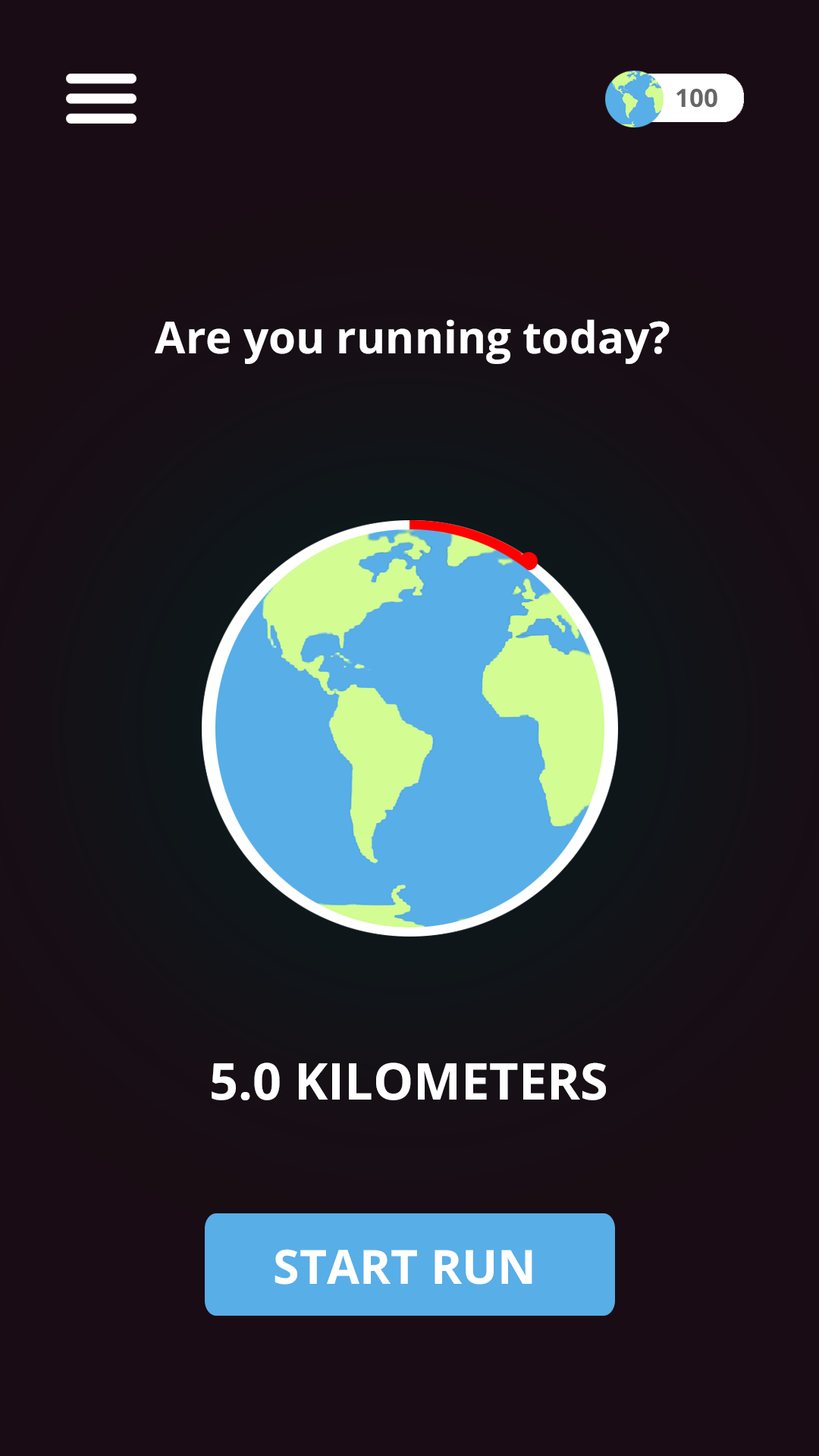
<style>
.page{position:relative;width:819px;height:1456px;background:#1a0c14}
.page>*{position:absolute;margin:0}
.t1{font:25.3px "OpenSans-Bold";color:#666666}
.t2{font:44.2px "OpenSans-Bold";color:#ffffff}
.t3{font:50.6px "OpenSans-Bold";color:#ffffff}
.t4{font:47.4px "OpenSans-Bold";color:#ffffff}
</style>
<div class="page">
<p class="t1" style="left:676px;top:89px;width:41px;height:19px">100</p>
<p class="t2" style="left:155px;top:319px;width:515px;height:45px">Are you running today?</p>
<p class="t3" style="left:212px;top:1062px;width:394px;height:38px">5.0 KILOMETERS</p>
<p class="t4" style="left:275px;top:1249px;width:257px;height:36px">START RUN</p>
</div>
